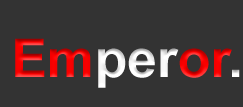
<style>
.page{position:relative;width:243px;height:107px;background:#333333}
.page>*{position:absolute;margin:0}
.t1{font:53.5px "Arial-BoldMT";color:#ffffff}
.t2{font:53.5px "Arial-BoldMT";color:#ff0000}
</style>
<div class="page">
<p class="t1" style="left:15px;top:38px;width:225px;height:50px"><span class="t2">Em</span>per<span class="t2">or</span>.</p>
</div>
